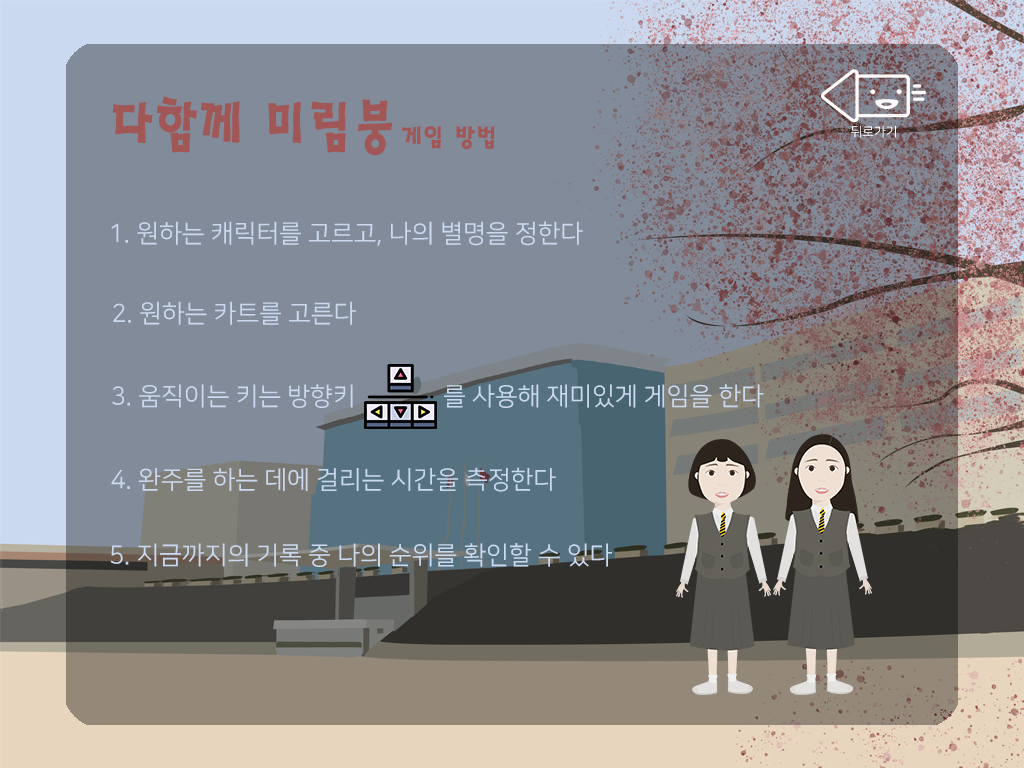
<style>
.page{position:relative;width:1024px;height:768px;background:#818b99}
.page>*{position:absolute;margin:0}
.t1{font:62.1px "HaanSaleB";color:#a15756;scale:0.9 1}
.t2{font:27.2px "HaanSaleB";color:#a15756}
.t3{font:12.9px "NanumSquareOTFR";color:#ffffff}
.t4{font:25px "NanumSquareOTFR";color:#cad9ef}
</style>
<div class="page">
<p class="t1" style="left:112px;top:96px;width:281px;height:60px">다함께 미림붕</p>
<p class="t2" style="left:402px;top:126px;width:93px;height:24px">게임 방법</p>
<p class="t3" style="left:851px;top:125px;width:45px;height:13px">뒤로가기</p>
<p class="t4" style="left:111px;top:221px;width:472px;height:25px">1. 원하는 캐릭터를 고르고, 나의 별명을 정한다</p>
<p class="t4" style="left:113px;top:301px;width:243px;height:24px">2. 원하는 카트를 고른다</p>
<p class="t4" style="left:112px;top:384px;width:652px;height:24px">3. 움직이는 키는 방향키              를 사용해 재미있게 게임을 한다</p>
<p class="t4" style="left:111px;top:467px;width:445px;height:25px">4. 완주를 하는 데에 걸리는 시간을 측정한다</p>
<p class="t4" style="left:110px;top:543px;width:502px;height:24px">5. 지금까지의 기록 중 나의 순위를 확인할 수 있다</p>
</div>
